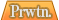
<style>
.page{position:relative;width:59px;height:20px}
.page>*{position:absolute;margin:0}
.t1{font:16px "RyuminPro-ExBold";letter-spacing:-0.08em;color:#e6e6e6;scale:0.9 1}
</style>
<div class="page">
<p class="t1" style="left:10px;top:5px;width:41px;height:12px">Prwtn.</p>
</div>
